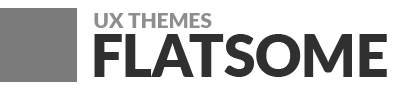
<style>
.page{position:relative;width:400px;height:92px;background:#ffffff}
.page>*{position:absolute;margin:0}
.t1{font:21.1px "Lato-Black";color:#8e8e8e}
.t2{font:57.6px "Lato-Black";color:#303030}
</style>
<div class="page">
<p class="t1" style="left:94px;top:13px;width:118px;height:15px">UX THEMES</p>
<p class="t2" style="left:94px;top:34px;width:293px;height:43px">FLATSOME</p>
</div>
